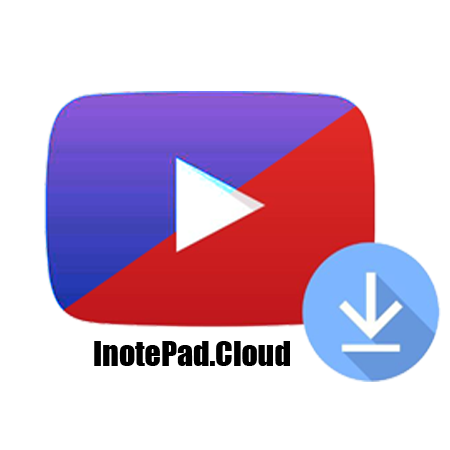
<style>
.page{position:relative;width:450px;height:450px;background:#ffffff}
.page>*{position:absolute;margin:0}
.t1{font:31.8px "Impact";color:#000000}
</style>
<div class="page">
<p class="t1" style="left:94px;top:341px;width:196px;height:25px">InotePad.Cloud</p>
</div>
